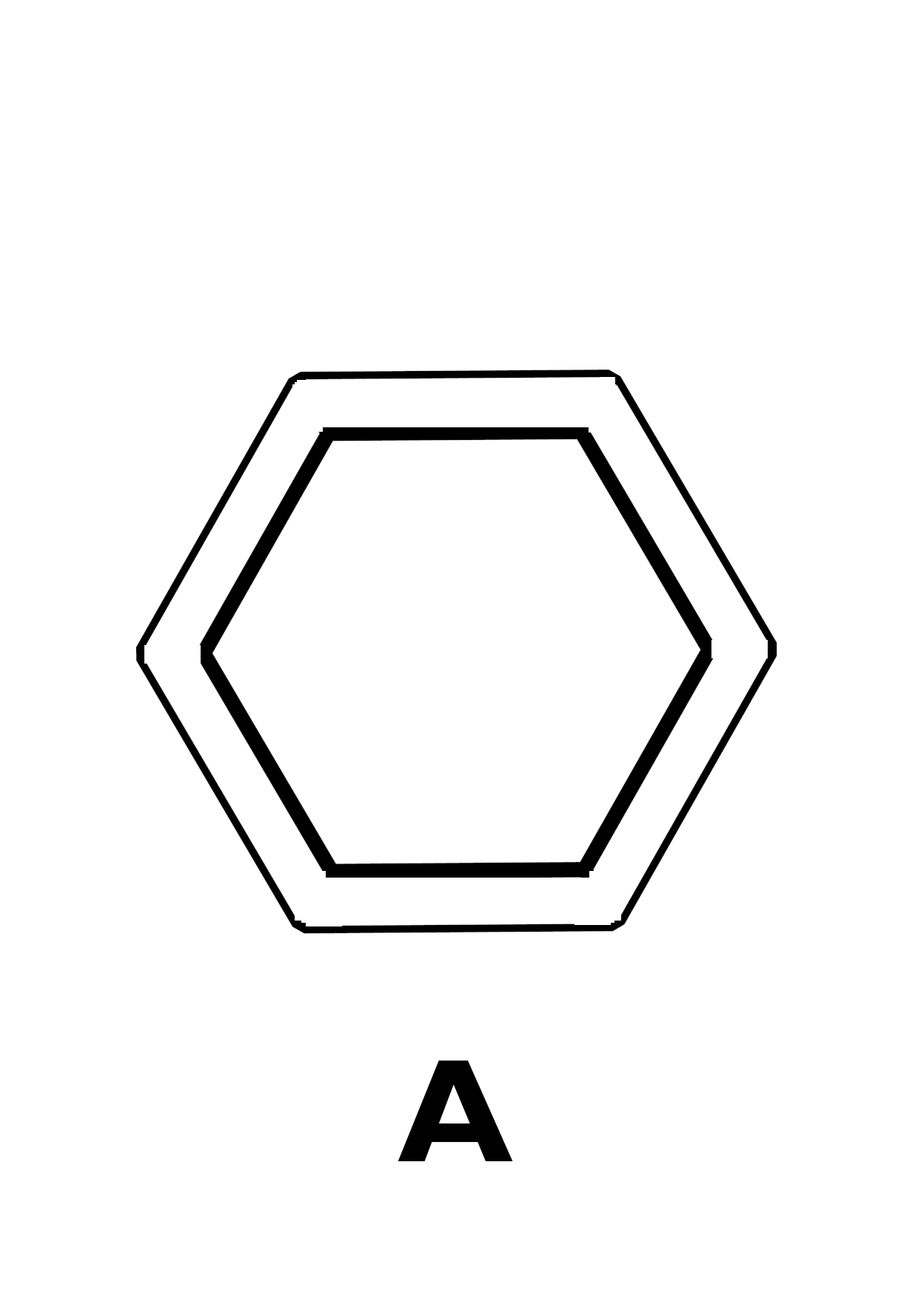
<style>
.page{position:relative;width:918px;height:1299px;background:#ffffff}
.page>*{position:absolute;margin:0}
.t1{font:148.1px "GillSansMT-Bold";color:#000000}
</style>
<div class="page">
<p class="t1" style="left:398px;top:1060px;width:115px;height:101px">A</p>
</div>
